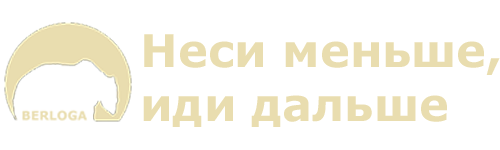
<style>
.page{position:relative;width:500px;height:150px;background:#ffffff}
.page>*{position:absolute;margin:0}
.t1{font:45px "Verdana-Bold";color:#e9ddaf}
</style>
<div class="page">
<p class="t1" style="left:143px;top:34px;width:357px;height:93px">Неси меньше,<br>иди дальше</p>
</div>
